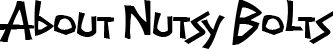
<style>
.page{position:relative;width:333px;height:49px;background:#ffffff}
.page>*{position:absolute;margin:0}
.t1{font:60px "Screwball";color:#000000}
</style>
<div class="page">
<p class="t1" style="left:0px;top:0px;width:333px;height:49px">About Nutsy Bolts</p>
</div>
